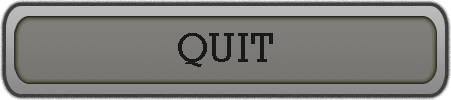
<style>
.page{position:relative;width:451px;height:100px}
.page>*{position:absolute;margin:0}
.t1{font:41.7px "Rockwell";color:#171717}
</style>
<div class="page">
<p class="t1" style="left:178px;top:33px;width:95px;height:34px">QUIT</p>
</div>
